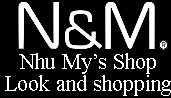
<style>
.page{position:relative;width:171px;height:98px;background:#000000}
.page>*{position:absolute;margin:0}
.t1{font:22px/22px "TimesNewRomanPSMT";color:#ffffff}
</style>
<div class="page">
<p class="t1" style="left:5px;top:53px;width:166px;height:43px;text-align:center">Nhu My’s Shop<br>Look and shopping</p>
</div>
